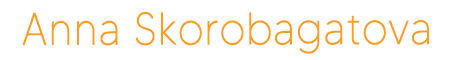
<style>
.page{position:relative;width:450px;height:60px;background:#ffffff}
.page>*{position:absolute;margin:0}
.t1{font:45.6px "MADETOMMY-Thin";color:#ff9d1e;font-weight:bold;scale:0.91 1}
</style>
<div class="page">
<p class="t1" style="left:22px;top:11px;width:407px;height:43px">Anna Skorobagatova</p>
</div>
